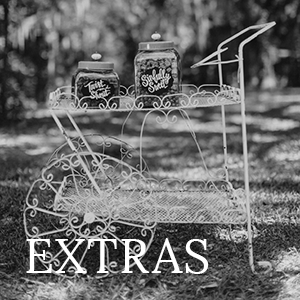
<style>
.page{position:relative;width:300px;height:300px}
.page>*{position:absolute;margin:0}
.t1{font:47.6px "Lora-Regular";letter-spacing:0.025em;color:#ffffff}
</style>
<div class="page">
<p class="t1" style="left:26px;top:238px;width:183px;height:36px">EXTRAS</p>
</div>
